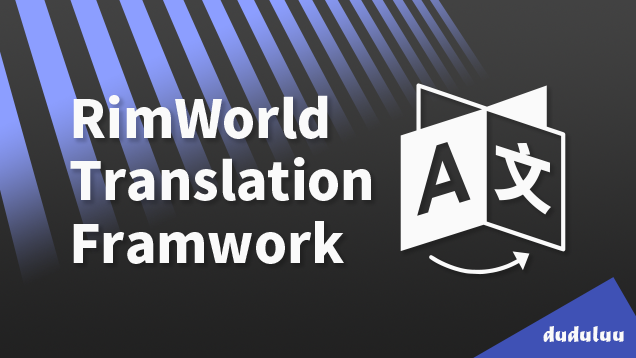
<style>
.page{position:relative;width:636px;height:358px}
.page>*{position:absolute;margin:0}
.t1{font:52px "NotoSansSC-Black";color:#fafafa}
.t2{font:24px "MaturaMTScriptCapitals";color:#fafafa}
</style>
<div class="page">
<p class="t1" style="left:70px;top:95px;width:301px;height:169px">RimWorld<br>Translation<br>Framwork</p>
<p class="t2" style="left:543px;top:326px;width:81px;height:16px">duduluu</p>
</div>
